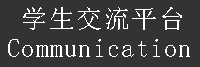
<style>
.page{position:relative;width:200px;height:67px;background:#333333}
.page>*{position:absolute;margin:0}
.t1{font:26.4px/9.8px "SimSun";letter-spacing:0.04em;color:#ffffff}
</style>
<div class="page">
<p class="t1" style="left:8px;top:7px;width:182px;height:50px">学生交流平台<br><br><br>Communication</p>
</div>
